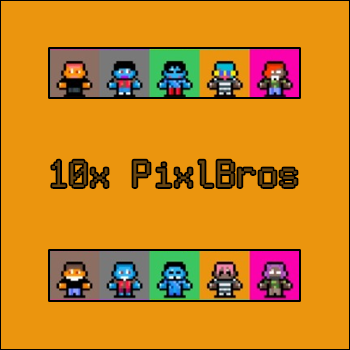
<style>
.page{position:relative;width:350px;height:350px;background:#eb950e}
.page>*{position:absolute;margin:0}
.t1{font:42px "FreePixel-Regular";color:#694713}
</style>
<div class="page">
<p class="t1" style="left:52px;top:160px;width:245px;height:27px">10x PixlBros</p>
</div>
